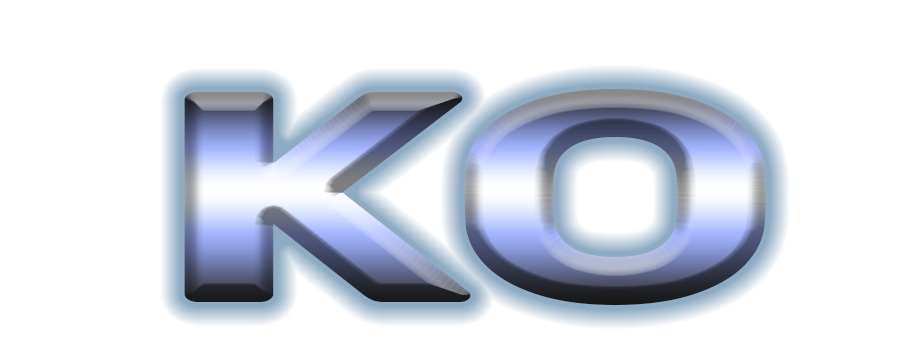
<style>
.page{position:relative;width:918px;height:363px;background:#ffffff}
.page>*{position:absolute;margin:0}
.t1{font:300px "Rubik-Bold";letter-spacing:-0.1em;scale:1.6 1}
</style>
<div class="page">
<p class="t1" style="left:184px;top:89px;width:582px;height:216px">K O</p>
</div>
